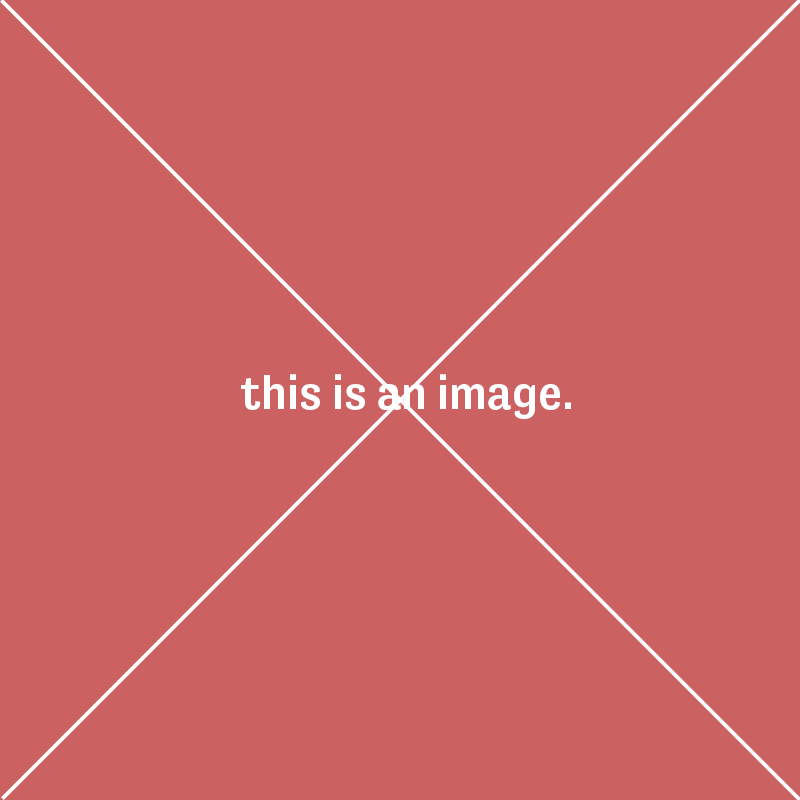
<style>
.page{position:relative;width:800px;height:800px;background:#cb6161}
.page>*{position:absolute;margin:0}
.t1{font:48px "Tenso-Medium";color:#ffffff}
</style>
<div class="page">
<p class="t1" style="left:241px;top:374px;width:330px;height:45px">this is an image.</p>
</div>
